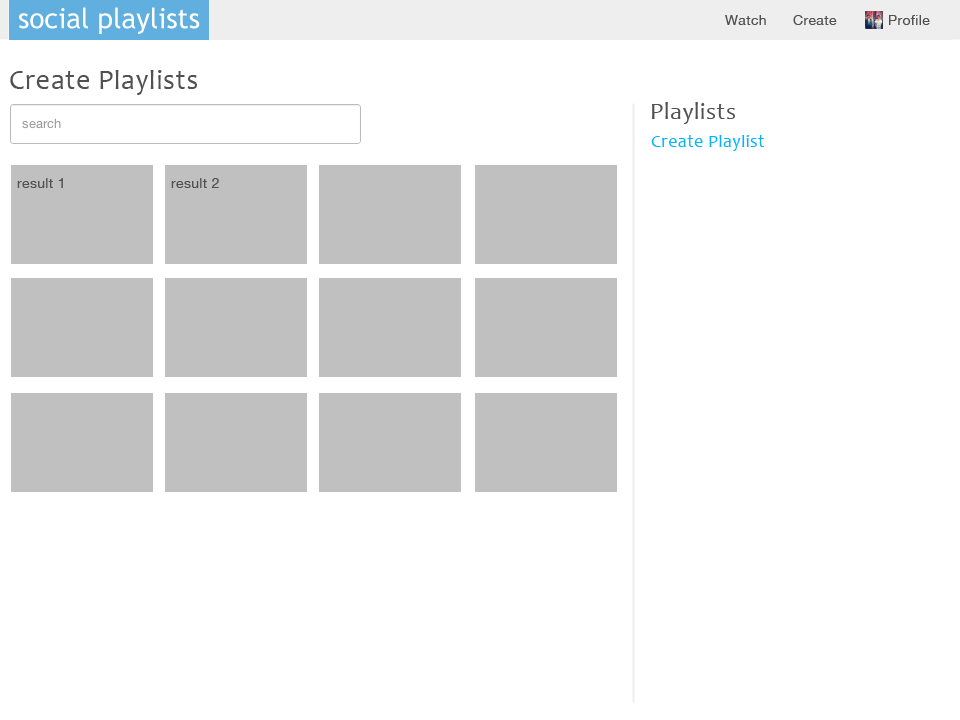
<style>
.page{position:relative;width:960px;height:720px;background:#ffffff}
.page>*{position:absolute;margin:0}
.t1{font:14px "HelveticaNeue";letter-spacing:0.025em;color:#515151}
.t2{font:28px "Candara";letter-spacing:0.025em;color:#515151}
.t3{font:24px "Candara";letter-spacing:0.025em;color:#515151}
.t4{font:18px "Candara";letter-spacing:0.025em;color:#00b4ff}
</style>
<div class="page">
<p class="t1" style="left:725px;top:15px;width:41px;height:10px">Watch</p>
<p class="t1" style="left:793px;top:15px;width:44px;height:10px">Create</p>
<p class="t1" style="left:889px;top:15px;width:41px;height:10px">Profile</p>
<p class="t2" style="left:10px;top:70px;width:187px;height:25px">Create Playlists</p>
<p class="t3" style="left:652px;top:102px;width:83px;height:22px">Playlists</p>
<p class="t4" style="left:651px;top:135px;width:113px;height:16px">Create Playlist</p>
<p class="t1" style="left:17px;top:178px;width:46px;height:10px">result 1</p>
<p class="t1" style="left:171px;top:178px;width:48px;height:10px">result 2</p>
</div>
